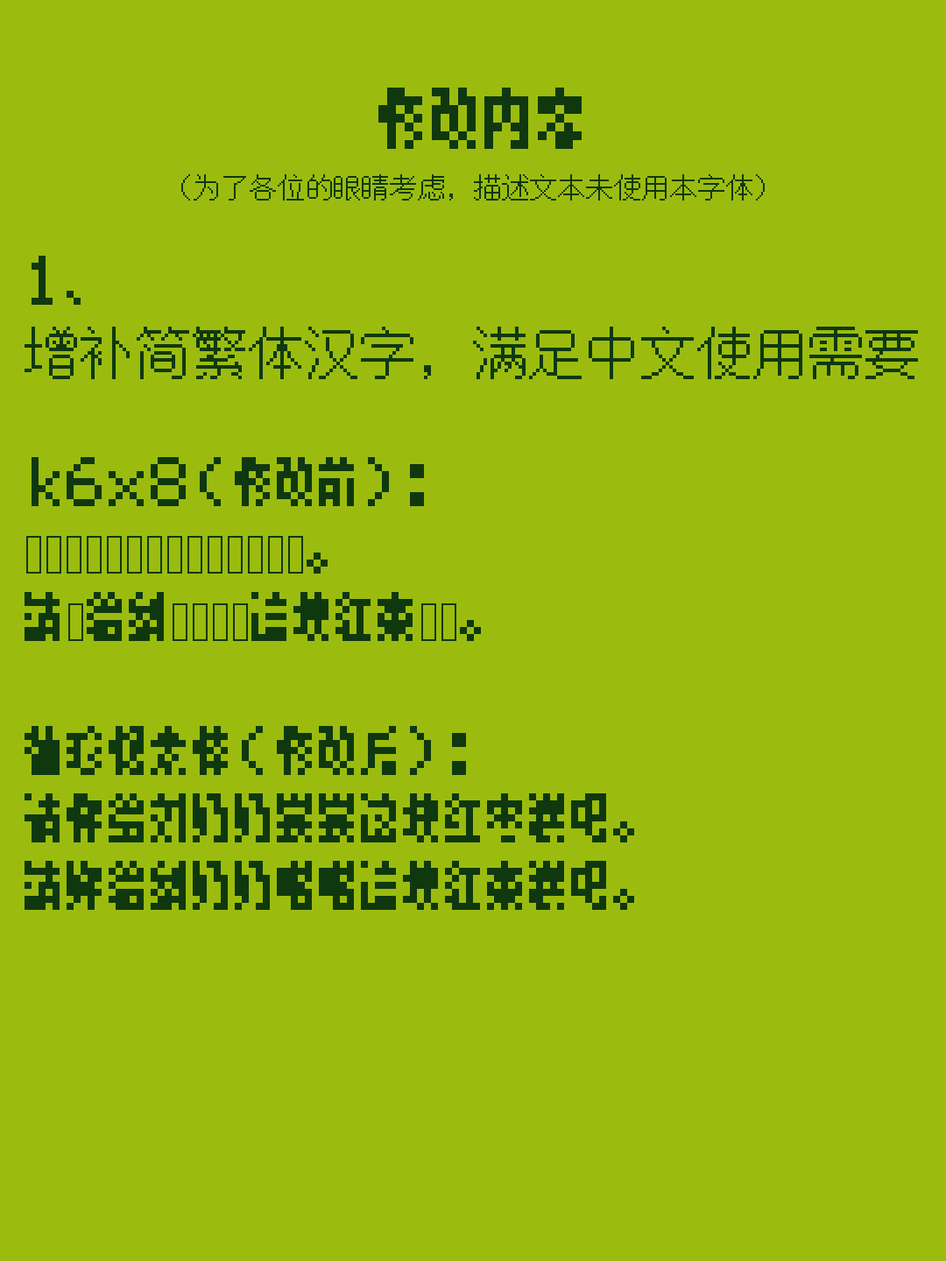
<style>
.page{position:relative;width:946px;height:1261px;background:#9bbc0f}
.page>*{position:absolute;margin:0}
.t1{font:70.1px "XiuZhenXiangSuTi";color:#0f380f}
.t2{font:70.1px "Z-Labs-Round-Bitmap-16px-CN-Regular";color:#0f380f}
.t3{font:28px "Z-Labs-Round-Bitmap-16px-CN-Regular";color:#0f380f}
.t4{font:56px "XiuZhenXiangSuTi";color:#0f380f}
.t5{font:56px "Z-Labs-Round-Bitmap-16px-CN-Regular";color:#0f380f}
.t6{font:56px "k6x8Gothic";color:#0f380f}
</style>
<div class="page">
<p class="t1" style="left:378px;top:88px;width:203px;height:61px"><span class="t2"> </span>修改内容</p>
<p class="t3" style="left:181px;top:174px;width:583px;height:27px">（为了各位的眼睛考虑，描述文本未使用本字体）</p>
<p class="t4" style="left:25px;top:256px;width:893px;height:654px">１、<br><span class="t5">增补简繁体汉字，满足中文使用需要<br><br></span>ｋ６ｘ８（修改前）：<br><span class="t6">请你给刘奶奶尝尝这块红枣糕吧。<br>請妳給劉奶奶嚐嚐這塊紅棗糕吧。<br><br></span>袖珍像素体（修改后）：<br>请你给刘奶奶尝尝这块红枣糕吧。<br>請妳給劉奶奶嚐嚐這塊紅棗糕吧。</p>
</div>
